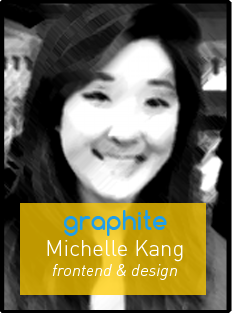
<style>
.page{position:relative;width:232px;height:313px}
.page>*{position:absolute;margin:0}
.t1{font:16.7px "DIN-LightItalicAlt";color:#ffffff}
.t2{font:25px "Comfortaa-Bold";color:#20a0ea}
.t3{font:22.2px "DIN-Light";color:#ffffff}
</style>
<div class="page">
<p class="t1" style="left:47px;top:210px;width:136px;height:70px;text-align:center"><span class="t2">graphite<br></span><span class="t3">Michelle Kang<br></span>frontend &amp; design</p>
</div>
